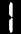
<style>
.page{position:relative;width:21px;height:34px;background:#000000}
.page>*{position:absolute;margin:0}
.t1{font:48px "Digital-7";color:#ffffff}
</style>
<div class="page">
<p class="t1" style="left:9px;top:2px;width:4px;height:31px">1</p>
</div>
